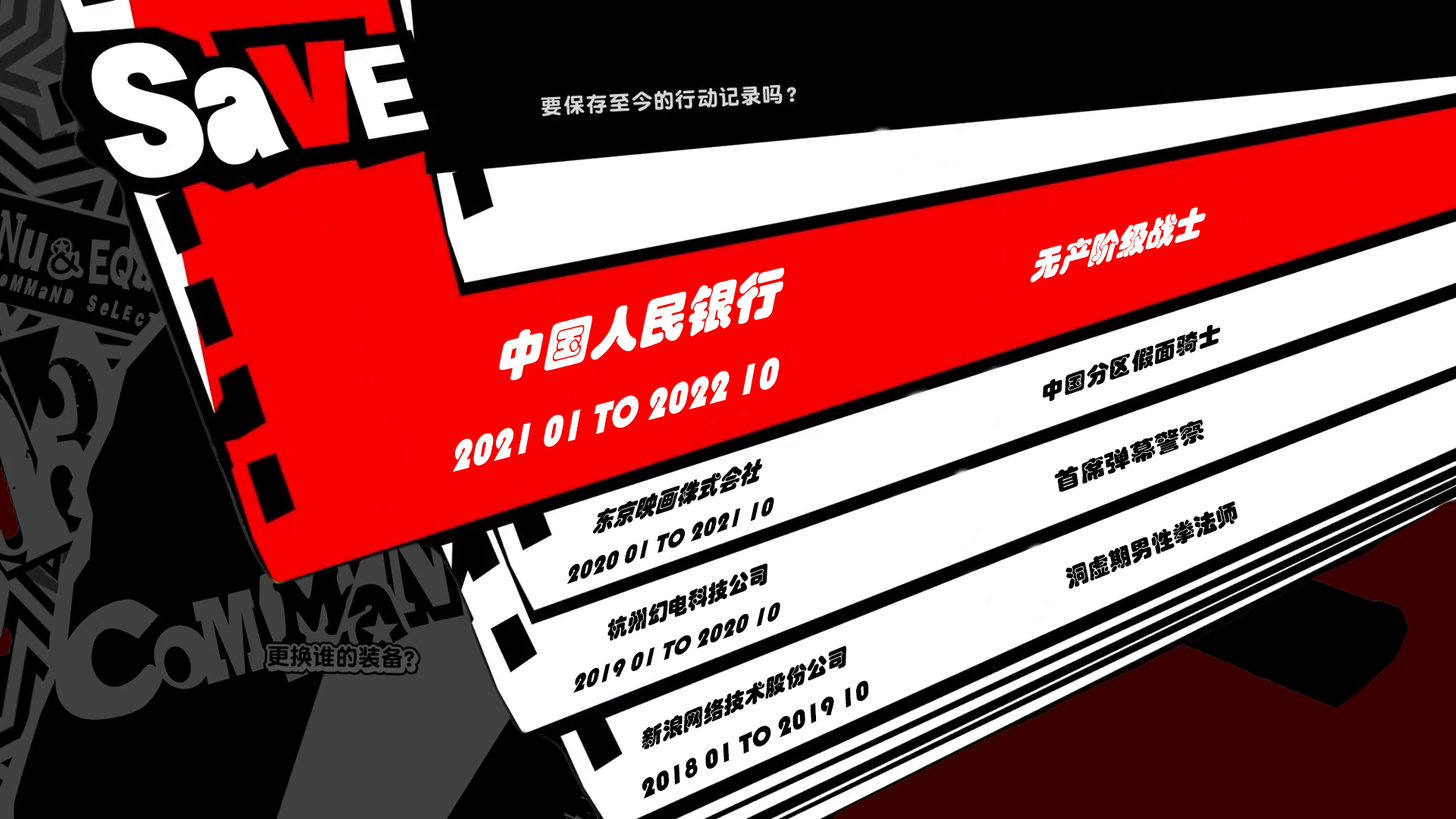
<style>
.page{position:relative;width:1456px;height:819px;background:#000000}
.page>*{position:absolute;margin:0}
.t1{font:36.4px "STHupo";color:#ffffff;scale:0.82 1}
.t2{font:54.6px "STHupo";color:#ffffff;scale:0.9 1}
.t3{font:22.7px "STHupo";color:#000000;scale:1.04 1}
.t4{font:45.5px "STHupo";color:#ffffff;scale:0.82 1}
.t5{font:22.7px "STHupo";color:#000000;scale:1.17 1}
.t6{font:27.3px "STHupo";color:#000000;scale:0.81 1}
.t7{font:27.3px "STHupo";color:#000000;scale:0.88 1}
.t8{font:22.7px "STHupo";color:#000000}
.t9{font:22.7px "STHupo";color:#000000;scale:0.94 1}
.t10{font:27.3px "STHupo";color:#000000;scale:0.89 1}
.t11{font:27.3px "STHupo";color:#000000}
</style>
<div class="page">
<p class="t1" style="left:1031px;top:207px;width:175px;height:76px;rotate:-15deg">无产阶级战士</p>
<p class="t2" style="left:499px;top:268px;width:285px;height:113px;rotate:-14deg">中国人民银行</p>
<p class="t3" style="left:1043px;top:325px;width:177px;height:76px;rotate:-19deg">中国分区假面骑士</p>
<p class="t4" style="left:453px;top:357px;width:327px;height:115px;rotate:-15deg">2021 01 TO 2022 10</p>
<p class="t5" style="left:1054px;top:419px;width:150px;height:73px;rotate:-20deg">首席弹幕警察</p>
<p class="t6" style="left:593px;top:459px;width:169px;height:75px;rotate:-18deg">东京映画株式会社</p>
<p class="t7" style="left:567px;top:497px;width:207px;height:87px;rotate:-19deg">2020 01 TO 2021 10</p>
<p class="t8" style="left:1065px;top:501px;width:173px;height:88px;rotate:-22deg">洞虚期男性拳法师</p>
<p class="t9" style="left:607px;top:563px;width:160px;height:78px;rotate:-20deg">杭州幻电科技公司</p>
<p class="t10" style="left:573px;top:602px;width:207px;height:91px;rotate:-20deg">2019 01 TO 2020 10</p>
<p class="t8" style="left:642px;top:645px;width:204px;height:105px;rotate:-23deg">新浪网络技术股份公司</p>
<p class="t11" style="left:642px;top:680px;width:227px;height:119px;rotate:-24deg">2018 01 TO 2019 10</p>
</div>
